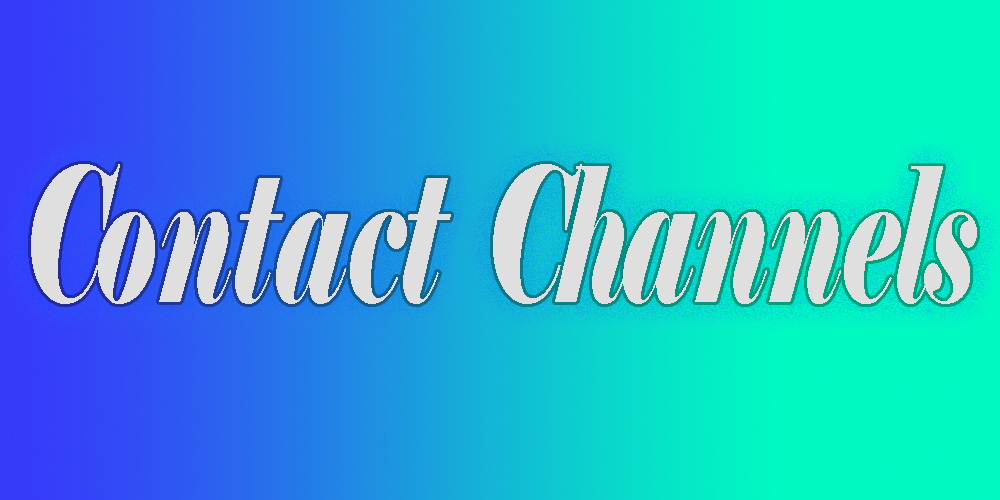
<style>
.page{position:relative;width:1000px;height:500px}
.page>*{position:absolute;margin:0}
.t1{font:186.4px "Elephant-Italic";color:#dfdfdf;scale:0.59 1}
</style>
<div class="page">
<p class="t1" style="left:31px;top:164px;width:946px;height:140px">Contact  Channels</p>
</div>
